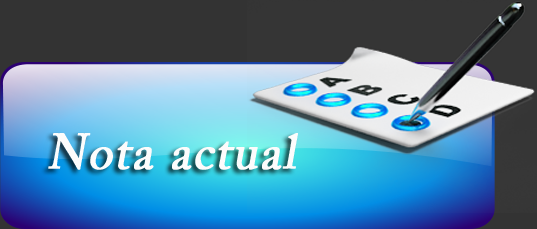
<style>
.page{position:relative;width:537px;height:229px}
.page>*{position:absolute;margin:0}
.t1{font:48px "ACaslonPro-Regular";letter-spacing:0.02em;color:#fcfcfc;font-weight:bold;font-style:italic}
</style>
<div class="page">
<p class="t1" style="left:48px;top:133px;width:250px;height:37px">Nota actual</p>
</div>
